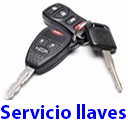
<style>
.page{position:relative;width:128px;height:128px;background:#fefefe}
.page>*{position:absolute;margin:0}
.t1{font:20px "MyriadPro-Bold";color:#0000ff}
</style>
<div class="page">
<p class="t1" style="left:0px;top:104px;width:126px;height:15px">Servicio llaves</p>
</div>
